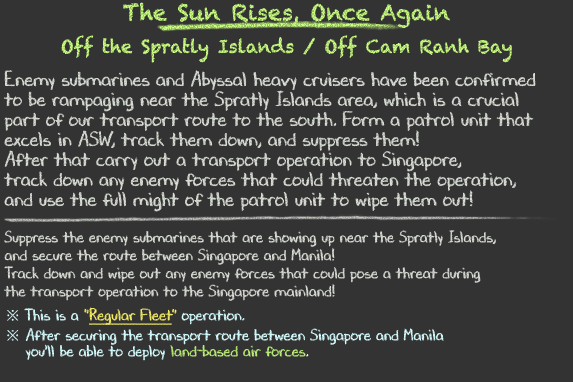
<style>
.page{position:relative;width:573px;height:382px;background:#333333}
.page>*{position:absolute;margin:0}
.t1{font:18px/36px "Chalkduster"}
.t2{font:22px/36px "Chalkduster"}
.t3{font:20px/20px "DJBChalkItUp";color:#d9ded6}
.t4{font:16px/18px "DJBChalkItUp";color:#d9ded6}
.t5{font:16px/24px "DJBChalkItUp";color:#d9ded6}
.t6{font:16px/20px "TimesNewRomanPSMT";color:#d7feff}
.t7{font:16px/20px "DJBChalkItUp";color:#d7feff}
.t8{font:16px/20px "DJBChalkItUp";color:#f5ed68}
.t9{font:16px/20px "DJBChalkItUp";color:#f5ed68;text-decoration:underline}
.t10{font:16px/16px "TimesNewRomanPSMT";color:#d7feff}
.t11{font:16px/16px "DJBChalkItUp";color:#d7feff}
.t12{font:16px/16px "DJBChalkItUp";color:#bdef78}
.t13{font:16px/18px "DJBChalkItUp";color:#d7feff}
</style>
<div class="page">
<p class="t1" style="left:61px;top:2px;width:451px;height:61px;text-align:center"><span class="t2">The Sun Rises, Once Again<br></span>Off the Spratly Islands / Off Cam Ranh Bay</p>
<p class="t3" style="left:3px;top:70px;width:533px;height:291px">Enemy submarines and Abyssal heavy cruisers have been confirmed<br>to be rampaging near the Spratly Islands area, which is a crucial<br>part of our transport route to the south. Form a patrol unit that<br>excels in ASW, track them down, and suppress them!<br>After that carry out a transport operation to Singapore,<br>track down any enemy forces that could threaten the operation,<br>and use the full might of the patrol unit to wipe them out!<br><br><span class="t4">Suppress the enemy submarines that are showing up near the Spratly Islands,<br>and secure the route between Singapore and Manila!<br>Track down and wipe out any enemy forces that could pose a threat during<br>the transport operation to the Singapore mainland</span><span class="t5">!<br></span><span class="t6">※ </span><span class="t7">This is a </span><span class="t8">"</span><span class="t9">Regular Fleet</span><span class="t8">"</span><span class="t7"> operation.<br></span><span class="t10">※</span><span class="t11"> After securing the transport route between Singapore and Manila<br>　 you'll be able to deploy </span><span class="t12">land-based air forces</span><span class="t13">.</span></p>
</div>
